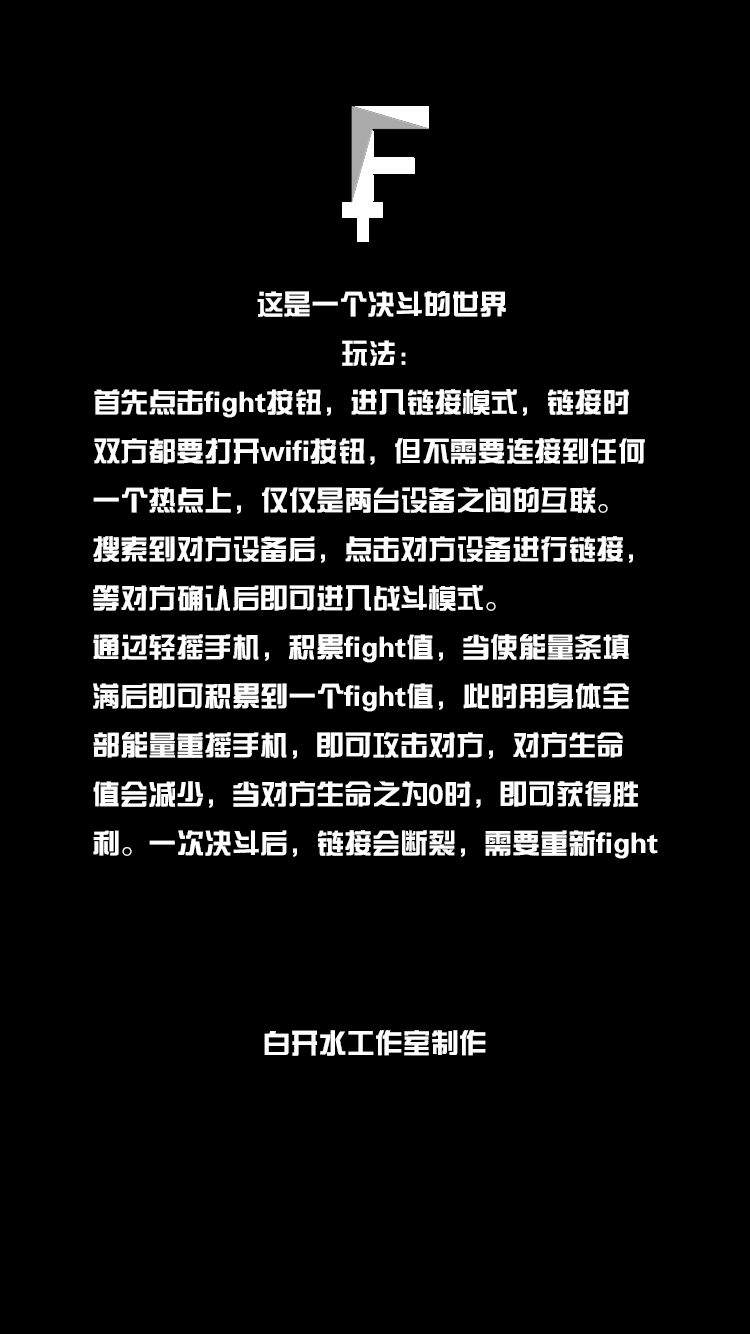
<style>
.page{position:relative;width:750px;height:1334px;background:#000000}
.page>*{position:absolute;margin:0}
.t1{font:28px "FZZYJW--GB1-0";color:#ffffff}
</style>
<div class="page">
<p class="t1" style="left:93px;top:291px;width:565px;height:568px">这是一个决斗的世界<br>                                玩法：<br>首先点击fight按钮，进入链接模式，链接时<br>双方都要打开wifi按钮，但不需要连接到任何<br>一个热点上，仅仅是两台设备之间的互联。<br>搜索到对方设备后，点击对方设备进行链接，<br>等对方确认后即可进入战斗模式。<br>通过轻摇手机，积累fight值，当使能量条填<br>满后即可积累到一个fight值，此时用身体全<br>部能量重摇手机，即可攻击对方，对方生命<br>值会减少，当对方生命之为0时，即可获得胜<br>利。一次决斗后，链接会断裂，需要重新fight</p>
<p class="t1" style="left:264px;top:1030px;width:222px;height:26px">白开水工作室制作</p>
</div>
